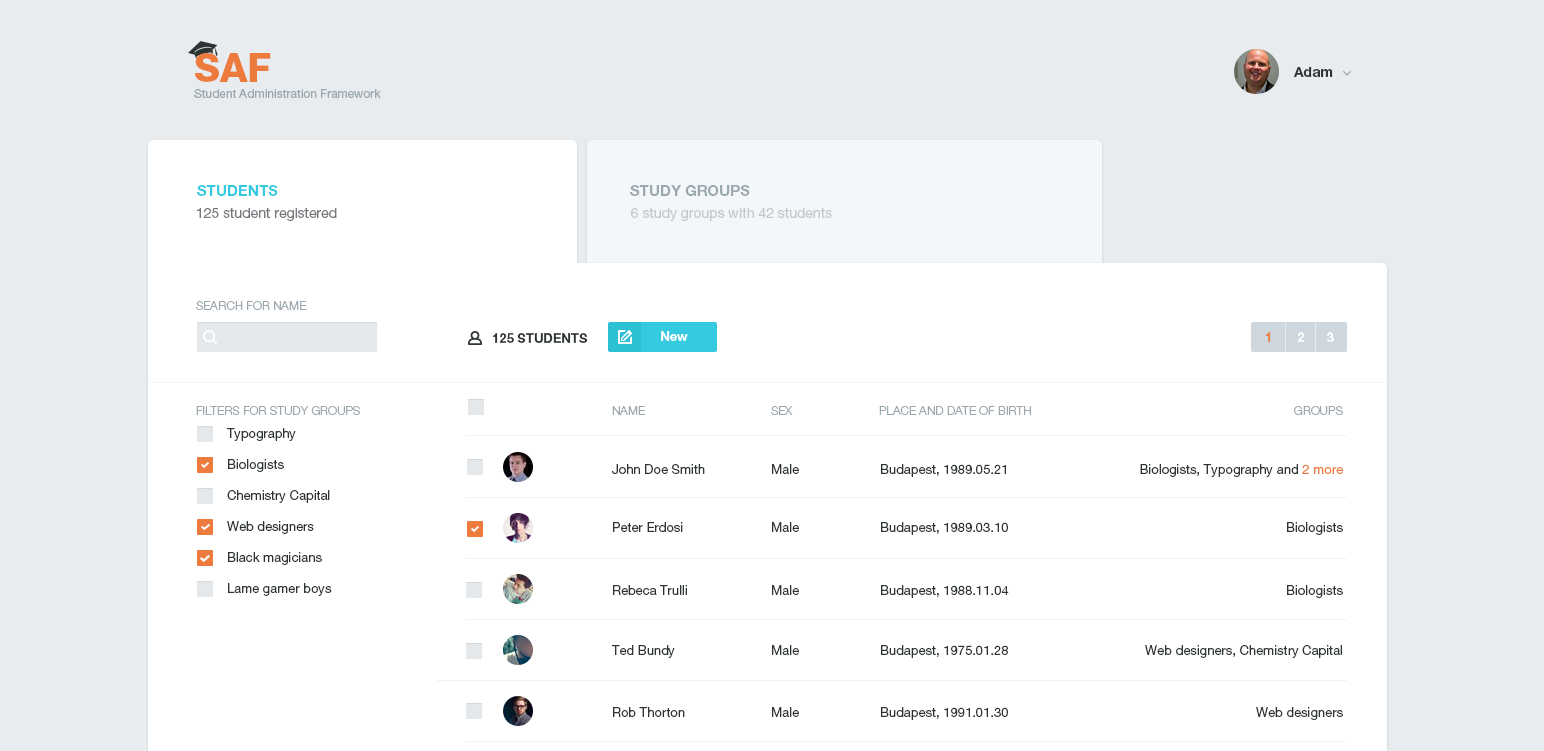
<style>
.page{position:relative;width:1544px;height:751px;background:#ffffff}
.page>*{position:absolute;margin:0}
.t1{font:39px "HelveticaNeueLTPro-Hv";color:#ed7b3d}
.t2{font:14px "HelveticaNeueLTPro-Bd";color:#2e3434}
.t3{font:12px "HelveticaNeueLTPro-Roman";color:#9ca8af}
.t4{font:15px "HelveticaNeueLTPro-Bd";color:#34cae0}
.t5{font:15px "HelveticaNeueLTPro-Bd";color:#9ca8af}
.t6{font:14px "HelveticaNeueLTPro-Roman";color:#767a7e}
.t7{font:14px "HelveticaNeueLTPro-Roman";color:#c2c8cc}
.t8{font:12px "HelveticaNeueLTPro-Lt";color:#9ca8af;text-transform:uppercase}
.t9{font:13px "HelveticaNeueLTPro-Bd";color:#2e3434}
.t10{font:13px "HelveticaNeueLTPro-Bd";color:#ffffff}
.t11{font:13px "HelveticaNeueLTPro-Bd";color:#ed7b3d}
.t12{font:13px/31px "HelveticaNeueLTPro-Roman";color:#2e3434}
.t13{font:13px "HelveticaNeueLTPro-Roman";color:#2e3434}
.t14{font:13px "HelveticaNeueLTPro-Roman";color:#ed7b3d}
</style>
<div class="page">
<p class="t1" style="left:195px;top:53px;width:76px;height:29px">SAF</p>
<p class="t2" style="left:1293px;top:67px;width:40px;height:10px">Adam</p>
<p class="t3" style="left:194px;top:89px;width:187px;height:9px">Student Administration Framework</p>
<p class="t4" style="left:197px;top:185px;width:81px;height:11px">STUDENTS</p>
<p class="t5" style="left:630px;top:185px;width:120px;height:11px">STUDY GROUPS</p>
<p class="t6" style="left:197px;top:208px;width:140px;height:13px">125 student registered</p>
<p class="t7" style="left:631px;top:208px;width:201px;height:13px">6 study groups with 42 students</p>
<p class="t8" style="left:196px;top:301px;width:111px;height:9px">SEARCH FOR NAME</p>
<p class="t9" style="left:492px;top:333px;width:96px;height:10px">125 STUDENTS</p>
<p class="t10" style="left:661px;top:331px;width:27px;height:10px">New</p>
<p class="t10" style="left:1265px;top:332px;width:69px;height:10px"><span class="t11">1</span>       2      3</p>
<p class="t8" style="left:196px;top:406px;width:164px;height:9px">Filters FOR STUDY GROUPS</p>
<p class="t8" style="left:612px;top:406px;width:34px;height:9px">NAME</p>
<p class="t8" style="left:771px;top:406px;width:22px;height:9px">SEX</p>
<p class="t8" style="left:879px;top:406px;width:152px;height:9px">place and Date of birth</p>
<p class="t8" style="left:1294px;top:406px;width:49px;height:9px">GROUPS</p>
<p class="t12" style="left:226px;top:428px;width:106px;height:168px">Typography<br>Biologists<br>Chemistry Capital<br>Web designers<br>Black magicians<br>Lame gamer boys</p>
<p class="t13" style="left:612px;top:464px;width:93px;height:10px">John Doe Smith</p>
<p class="t13" style="left:772px;top:464px;width:27px;height:10px">Male</p>
<p class="t13" style="left:881px;top:464px;width:125px;height:13px">Budapest, 1989.05.21</p>
<p class="t13" style="left:1140px;top:464px;width:203px;height:13px">Biologists, Typography and <span class="t14">2 more</span></p>
<p class="t13" style="left:613px;top:522px;width:70px;height:10px">Peter Erdosi</p>
<p class="t13" style="left:772px;top:522px;width:27px;height:10px">Male</p>
<p class="t13" style="left:881px;top:522px;width:127px;height:13px">Budapest, 1989.03.10</p>
<p class="t13" style="left:1287px;top:522px;width:56px;height:13px">Biologists</p>
<p class="t13" style="left:613px;top:585px;width:74px;height:10px">Rebeca Trulli</p>
<p class="t13" style="left:772px;top:585px;width:27px;height:10px">Male</p>
<p class="t13" style="left:881px;top:585px;width:128px;height:13px">Budapest, 1988.11.04</p>
<p class="t13" style="left:1287px;top:585px;width:56px;height:13px">Biologists</p>
<p class="t13" style="left:611px;top:645px;width:64px;height:13px">Ted Bundy</p>
<p class="t13" style="left:772px;top:645px;width:27px;height:10px">Male</p>
<p class="t13" style="left:881px;top:645px;width:127px;height:13px">Budapest, 1975.01.28</p>
<p class="t13" style="left:1145px;top:645px;width:197px;height:13px">Web designers, Chemistry Capital</p>
<p class="t13" style="left:613px;top:707px;width:72px;height:10px">Rob Thorton</p>
<p class="t13" style="left:772px;top:707px;width:27px;height:10px">Male</p>
<p class="t13" style="left:881px;top:707px;width:127px;height:13px">Budapest, 1991.01.30</p>
<p class="t13" style="left:1256px;top:707px;width:87px;height:13px">Web designers</p>
</div>
